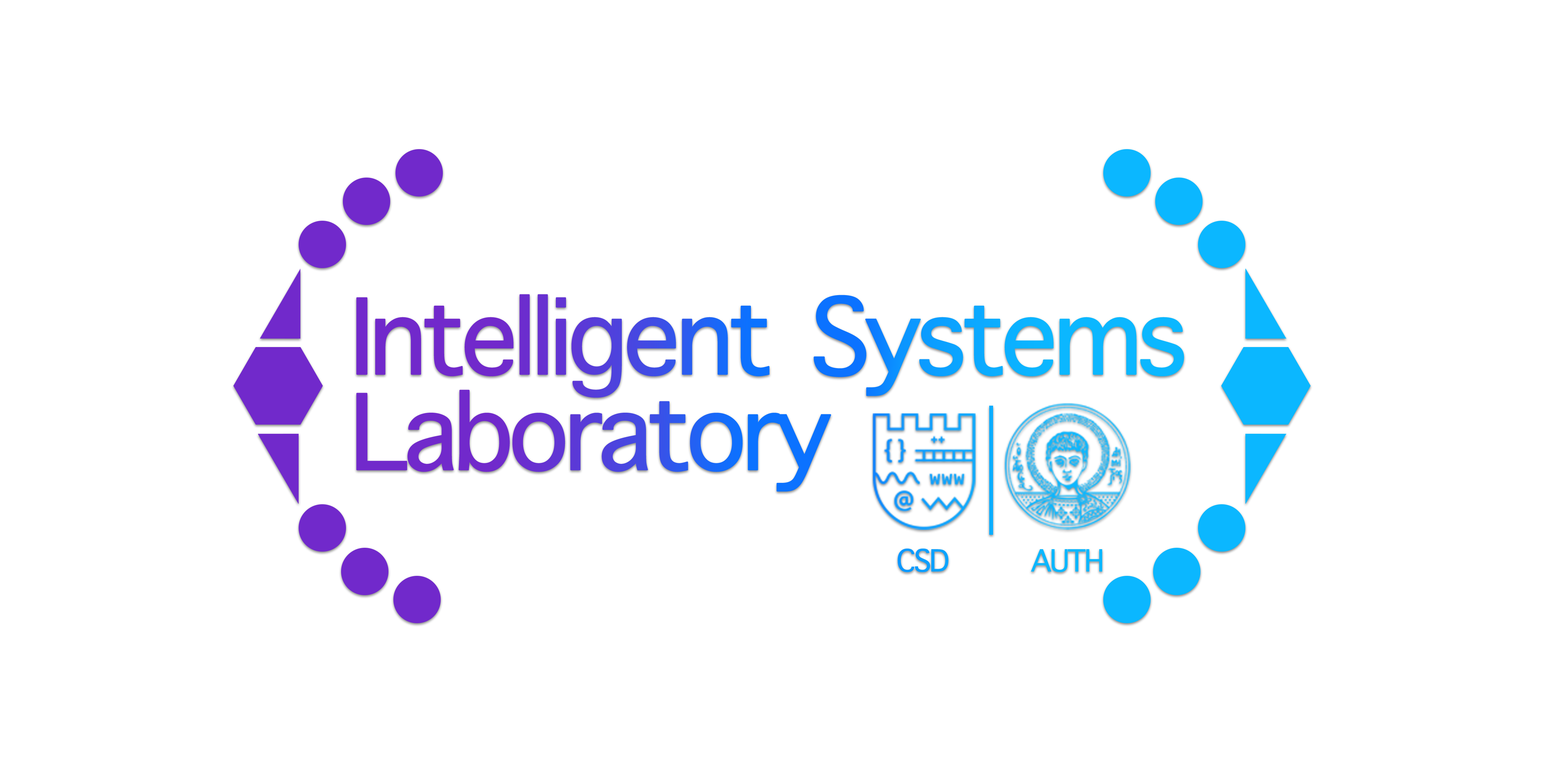
<style>
.page{position:relative;width:1544px;height:772px;background:#ffffff}
.page>*{position:absolute;margin:0}
.t1{font:142px/95.6px "AppleSymbols";letter-spacing:-0.065em;font-weight:bold}
.t2{font:41.1px "AppleSymbols";letter-spacing:-0.07em;font-weight:bold}
</style>
<div class="page">
<p class="t1" style="left:356px;top:294px;width:829px;height:198px">Intelligent Systems<br>Laboratory</p>
<p class="t2" style="left:898px;top:549px;width:204px;height:23px">CSD       AUTH</p>
</div>
